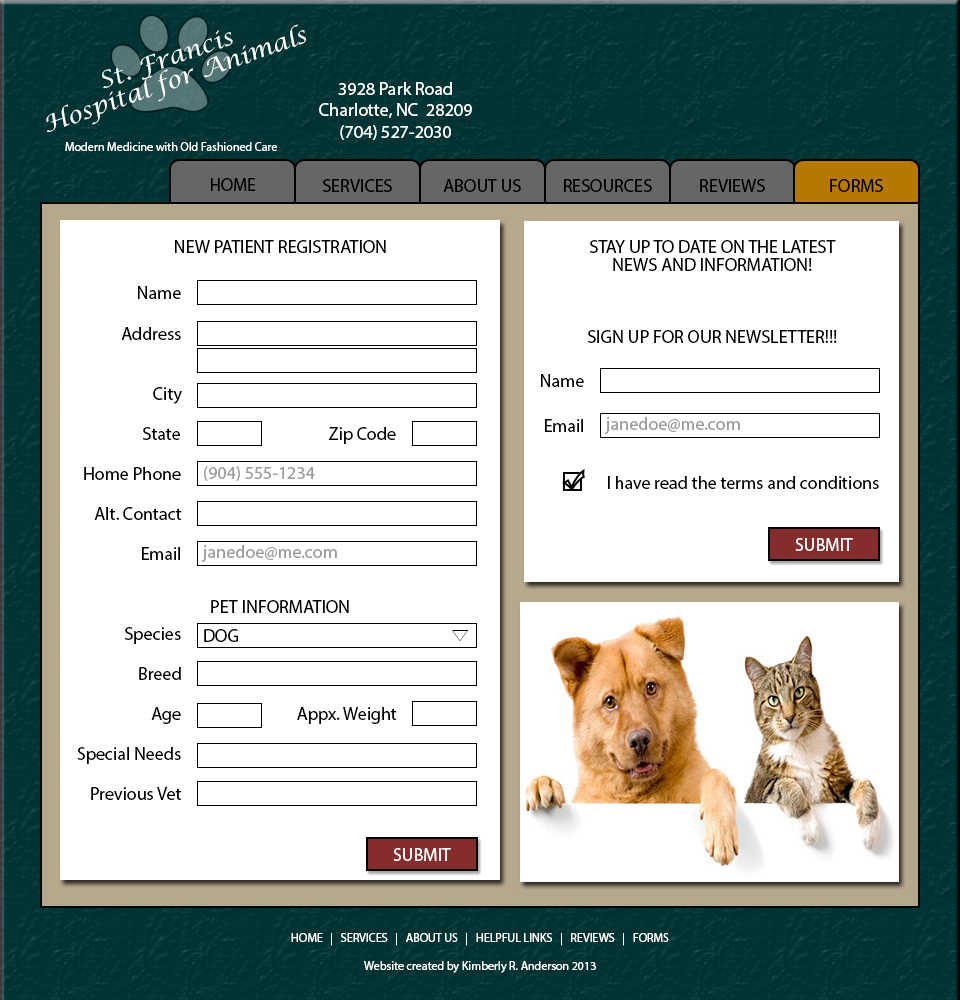
<style>
.page{position:relative;width:960px;height:1000px;background:#ffffff}
.page>*{position:absolute;margin:0}
.t1{font:22.9px/22.9px "LucidaCalligraphy-Italic";color:#ffffff;scale:1.07 1}
.t2{font:18px "MyriadPro-Regular";color:#ffffff}
.t3{font:12px "MyriadPro-Regular";color:#ffffff}
.t4{font:18px "MyriadPro-Regular";color:#000000}
.t5{font:18px/18px "MyriadPro-Regular";color:#000000}
.t6{font:18px "MyriadPro-Regular";color:#9b9999}
</style>
<div class="page">
<p class="t1" style="left:46px;top:24px;width:260px;height:108px;text-align:center;rotate:-19deg">St. Francis<br>Hospital for Animals</p>
<p class="t2" style="left:319px;top:82px;width:153px;height:58px;text-align:center">3928 Park Road<br>Charlotte, NC  28209<br>(704) 527-2030</p>
<p class="t3" style="left:65px;top:142px;width:212px;height:9px">Modern Medicine with Old Fashioned Care</p>
<p class="t4" style="left:211px;top:178px;width:45px;height:13px">HOME</p>
<p class="t4" style="left:323px;top:179px;width:69px;height:13px">SERVICES</p>
<p class="t4" style="left:443px;top:179px;width:78px;height:13px">ABOUT US</p>
<p class="t4" style="left:564px;top:179px;width:88px;height:13px">RESOURCES</p>
<p class="t4" style="left:700px;top:179px;width:65px;height:13px">REVIEWS</p>
<p class="t4" style="left:830px;top:179px;width:53px;height:13px">FORMS</p>
<p class="t4" style="left:175px;top:240px;width:211px;height:13px">NEW PATIENT REGISTRATION</p>
<p class="t5" style="left:588px;top:240px;width:249px;height:103px;text-align:center">STAY UP TO DATE ON THE LATEST<br>NEWS AND INFORMATION!<br><br><br><br>SIGN UP FOR OUR NEWSLETTER!!!</p>
<p class="t4" style="left:138px;top:286px;width:43px;height:13px">Name</p>
<p class="t4" style="left:121px;top:327px;width:60px;height:13px">Address</p>
<p class="t4" style="left:541px;top:374px;width:43px;height:13px">Name</p>
<p class="t4" style="left:153px;top:387px;width:29px;height:17px">City</p>
<p class="t4" style="left:545px;top:419px;width:38px;height:13px">Email</p>
<p class="t6" style="left:604px;top:417px;width:136px;height:17px">janedoe@me.com</p>
<p class="t4" style="left:143px;top:427px;width:37px;height:13px">State</p>
<p class="t4" style="left:328px;top:427px;width:68px;height:17px">Zip Code</p>
<p class="t4" style="left:84px;top:467px;width:97px;height:13px">Home Phone</p>
<p class="t6" style="left:204px;top:466px;width:111px;height:15px">(904) 555-1234</p>
<p class="t4" style="left:608px;top:476px;width:271px;height:13px">I have read the terms and conditions</p>
<p class="t4" style="left:94px;top:507px;width:88px;height:13px">Alt. Contact</p>
<p class="t6" style="left:201px;top:545px;width:136px;height:17px">janedoe@me.com</p>
<p class="t2" style="left:795px;top:538px;width:58px;height:13px">SUBMIT</p>
<p class="t4" style="left:142px;top:547px;width:38px;height:13px">Email</p>
<p class="t4" style="left:211px;top:600px;width:138px;height:13px">PET INFORMATION</p>
<p class="t4" style="left:125px;top:627px;width:56px;height:17px">Species</p>
<p class="t4" style="left:204px;top:629px;width:34px;height:13px">DOG</p>
<p class="t4" style="left:139px;top:667px;width:42px;height:13px">Breed</p>
<p class="t4" style="left:151px;top:707px;width:30px;height:17px">Age</p>
<p class="t4" style="left:297px;top:707px;width:100px;height:17px">Appx. Weight</p>
<p class="t4" style="left:77px;top:747px;width:104px;height:17px">Special Needs</p>
<p class="t4" style="left:91px;top:787px;width:91px;height:13px">Previous Vet</p>
<p class="t2" style="left:393px;top:848px;width:58px;height:13px">SUBMIT</p>
<p class="t3" style="left:291px;top:933px;width:378px;height:13px">HOME   |   SERVICES   |   ABOUT US   |   HELPFUL LINKS   |   REVIEWS   |   FORMS</p>
<p class="t3" style="left:364px;top:961px;width:232px;height:12px">Website created by Kimberly R. Anderson 2013</p>
</div>
